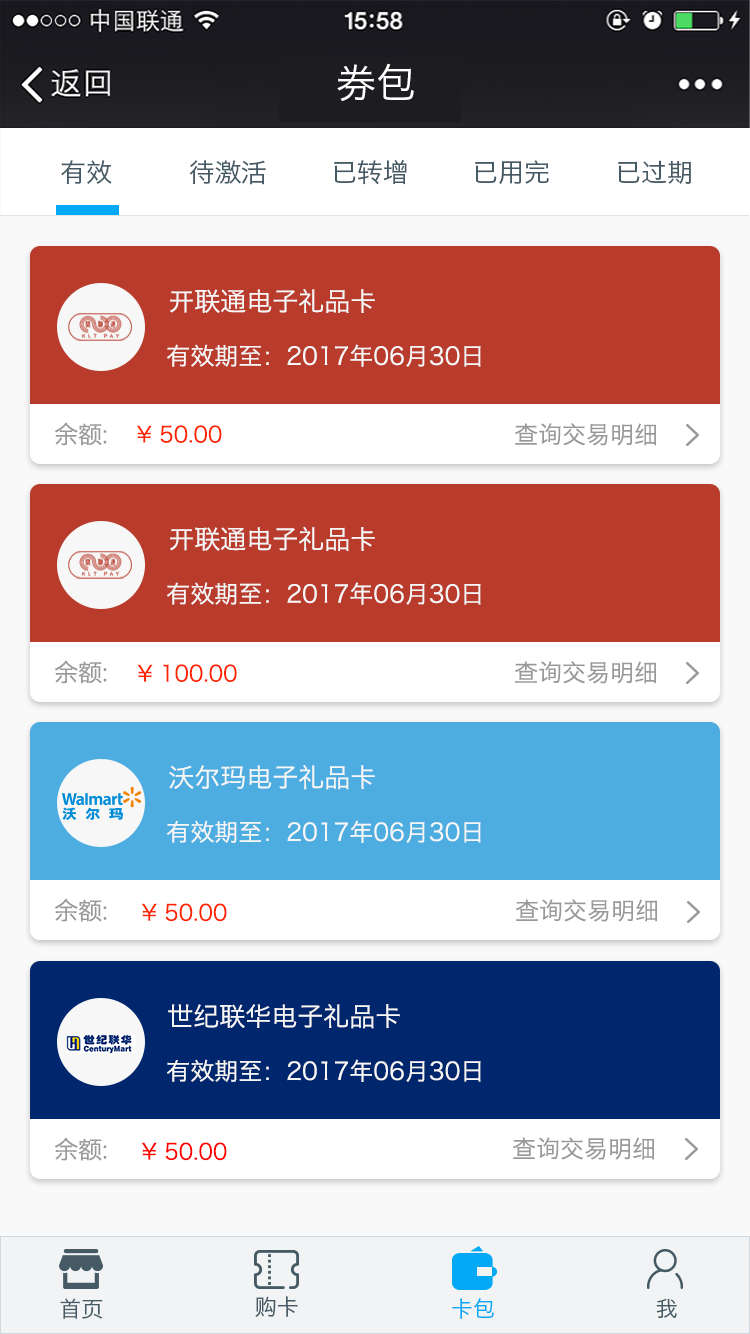
<style>
.page{position:relative;width:750px;height:1334px;background:#ffffff}
.page>*{position:absolute;margin:0}
.t1{font:40px "HiraginoSansGB-W3";color:#ffffff}
.t2{font:26px "HiraginoSansGB-W3";color:#455a64}
.t3{font:26px "HiraginoSansGB-W3";color:#f7f7f7}
.t4{font:24px "HiraginoSansGB-W3";color:#f7f7f7}
.t5{font:24px "HiraginoSansGB-W3";color:#999999}
.t6{font:22px "HiraginoSansGB-W3";color:#ff2400}
.t7{font:22px "HiraginoSansGB-W3";color:#ff0000}
.t8{font:21.9px "HiraginoSansGB-W3";color:#455a64}
.t9{font:22px "HiraginoSansGB-W3";color:#455a64}
.t10{font:22px "HiraginoSansGB-W3";color:#03a9f4}
.t11{font:22.1px "HiraginoSansGB-W3";color:#455a64}
</style>
<div class="page">
<p class="t1" style="left:337px;top:63px;width:77px;height:38px">券包</p>
<p class="t2" style="left:61px;top:160px;width:51px;height:24px">有效</p>
<p class="t2" style="left:189px;top:160px;width:77px;height:25px">待激活</p>
<p class="t2" style="left:334px;top:160px;width:73px;height:25px">已转增</p>
<p class="t2" style="left:475px;top:160px;width:74px;height:24px">已用完</p>
<p class="t2" style="left:618px;top:160px;width:73px;height:24px">已过期</p>
<p class="t3" style="left:170px;top:289px;width:205px;height:24px">开联通电子礼品卡</p>
<p class="t4" style="left:167px;top:344px;width:314px;height:23px">有效期至：2017年06月30日</p>
<p class="t5" style="left:55px;top:422px;width:52px;height:24px">余额:</p>
<p class="t6" style="left:137px;top:425px;width:85px;height:18px">¥ 50.00</p>
<p class="t5" style="left:515px;top:423px;width:141px;height:23px">查询交易明细</p>
<p class="t3" style="left:170px;top:526px;width:205px;height:25px">开联通电子礼品卡</p>
<p class="t4" style="left:167px;top:582px;width:314px;height:23px">有效期至：2017年06月30日</p>
<p class="t5" style="left:55px;top:660px;width:52px;height:24px">余额:</p>
<p class="t6" style="left:137px;top:664px;width:100px;height:18px">¥ 100.00</p>
<p class="t5" style="left:515px;top:661px;width:141px;height:23px">查询交易明细</p>
<p class="t3" style="left:169px;top:765px;width:206px;height:25px">沃尔玛电子礼品卡</p>
<p class="t4" style="left:167px;top:820px;width:314px;height:23px">有效期至：2017年06月30日</p>
<p class="t5" style="left:55px;top:898px;width:52px;height:24px">余额:</p>
<p class="t6" style="left:142px;top:903px;width:85px;height:19px">¥ 50.00</p>
<p class="t5" style="left:516px;top:899px;width:141px;height:23px">查询交易明细</p>
<p class="t3" style="left:168px;top:1004px;width:232px;height:25px">世纪联华电子礼品卡</p>
<p class="t4" style="left:167px;top:1059px;width:314px;height:23px">有效期至：2017年06月30日</p>
<p class="t5" style="left:55px;top:1137px;width:52px;height:24px">余额:</p>
<p class="t7" style="left:142px;top:1142px;width:85px;height:19px">¥ 50.00</p>
<p class="t5" style="left:513px;top:1137px;width:141px;height:23px">查询交易明细</p>
<p class="t8" style="left:60px;top:1298px;width:43px;height:21px">首页</p>
<p class="t9" style="left:255px;top:1296px;width:43px;height:21px">购卡</p>
<p class="t10" style="left:452px;top:1298px;width:42px;height:21px">卡包</p>
<p class="t11" style="left:656px;top:1298px;width:21px;height:20px">我</p>
</div>
